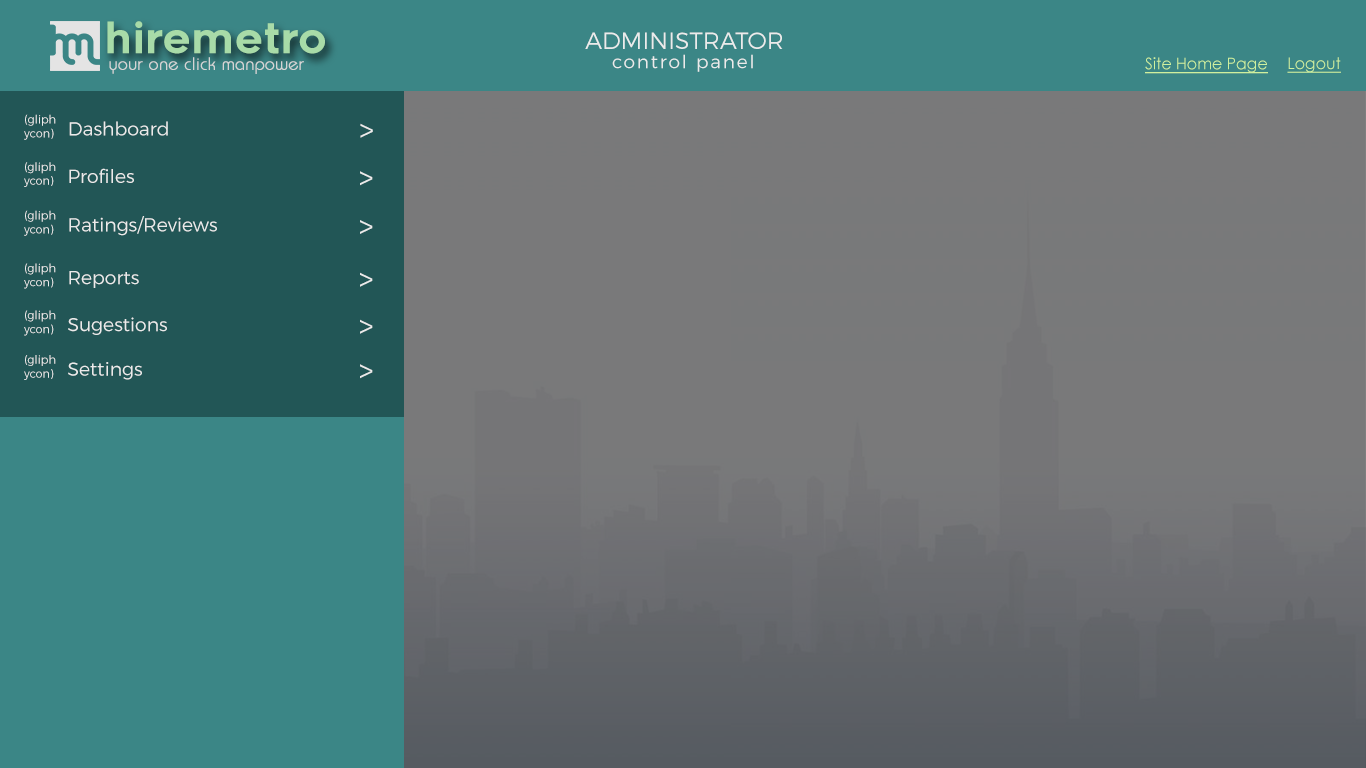
<style>
.page{position:relative;width:1366px;height:768px;background:#3b8686}
.page>*{position:absolute;margin:0}
.t1{font:42.1px "Renogare-Regular";color:#a8dba8}
.t2{font:23.6px "Montserrat-Light";color:#ebebeb}
.t3{font:18.4px "Montserrat-Light";letter-spacing:0.1em;color:#ebebeb}
.t4{font:17.5px "Brie-Light";color:#d5d5d5;font-weight:bold}
.t5{font:16.1px "CenturyGothic";color:#cff09e;text-decoration:underline}
.t6{font:11.5px "Montserrat-Light";color:#ebebeb}
.t7{font:18.9px "Montserrat-Light";color:#ebebeb}
.t8{font:31.2px "Montserrat-Light";color:#ebebeb}
</style>
<div class="page">
<p class="t1" style="left:107px;top:21px;width:218px;height:33px">hiremetro</p>
<p class="t2" style="left:585px;top:32px;width:198px;height:17px">ADMINISTRATOR</p>
<p class="t3" style="left:612px;top:54px;width:141px;height:18px">control panel</p>
<p class="t4" style="left:109px;top:57px;width:195px;height:17px">your one click manpower</p>
<p class="t5" style="left:1145px;top:57px;width:123px;height:17px">Site Home Page</p>
<p class="t5" style="left:1287px;top:57px;width:54px;height:16px">Logout</p>
<p class="t6" style="left:24px;top:114px;width:32px;height:26px">(gliph<br>ycon)</p>
<p class="t7" style="left:69px;top:121px;width:99px;height:15px">Dashboard</p>
<p class="t8" style="left:360px;top:123px;width:13px;height:15px;rotate:90deg">^</p>
<p class="t6" style="left:24px;top:162px;width:32px;height:25px">(gliph<br>ycon)</p>
<p class="t7" style="left:69px;top:168px;width:65px;height:15px">Profiles</p>
<p class="t8" style="left:360px;top:171px;width:13px;height:15px;rotate:90deg">^</p>
<p class="t6" style="left:24px;top:210px;width:32px;height:26px">(gliph<br>ycon)</p>
<p class="t7" style="left:69px;top:216px;width:148px;height:20px">Ratings/Reviews</p>
<p class="t8" style="left:360px;top:220px;width:13px;height:14px;rotate:90deg">^</p>
<p class="t6" style="left:24px;top:263px;width:32px;height:26px">(gliph<br>ycon)</p>
<p class="t7" style="left:69px;top:271px;width:70px;height:17px">Reports</p>
<p class="t8" style="left:360px;top:272px;width:13px;height:15px;rotate:90deg">^</p>
<p class="t6" style="left:24px;top:310px;width:32px;height:26px">(gliph<br>ycon)</p>
<p class="t7" style="left:68px;top:317px;width:99px;height:18px">Sugestions</p>
<p class="t8" style="left:360px;top:319px;width:13px;height:15px;rotate:90deg">^</p>
<p class="t6" style="left:24px;top:355px;width:32px;height:25px">(gliph<br>ycon)</p>
<p class="t7" style="left:68px;top:362px;width:74px;height:18px">Settings</p>
<p class="t8" style="left:360px;top:364px;width:13px;height:15px;rotate:90deg">^</p>
</div>
